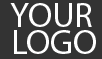
<style>
.page{position:relative;width:102px;height:59px;background:#333333}
.page>*{position:absolute;margin:0}
.t1{font:60px "MyriadPro-Regular";color:#ffffff}
</style>
<div class="page">
<p class="t1" style="left:10px;top:3px;width:82px;height:24px">YOUR</p>
<p class="t1" style="left:14px;top:30px;width:82px;height:24px">LOGO</p>
</div>
